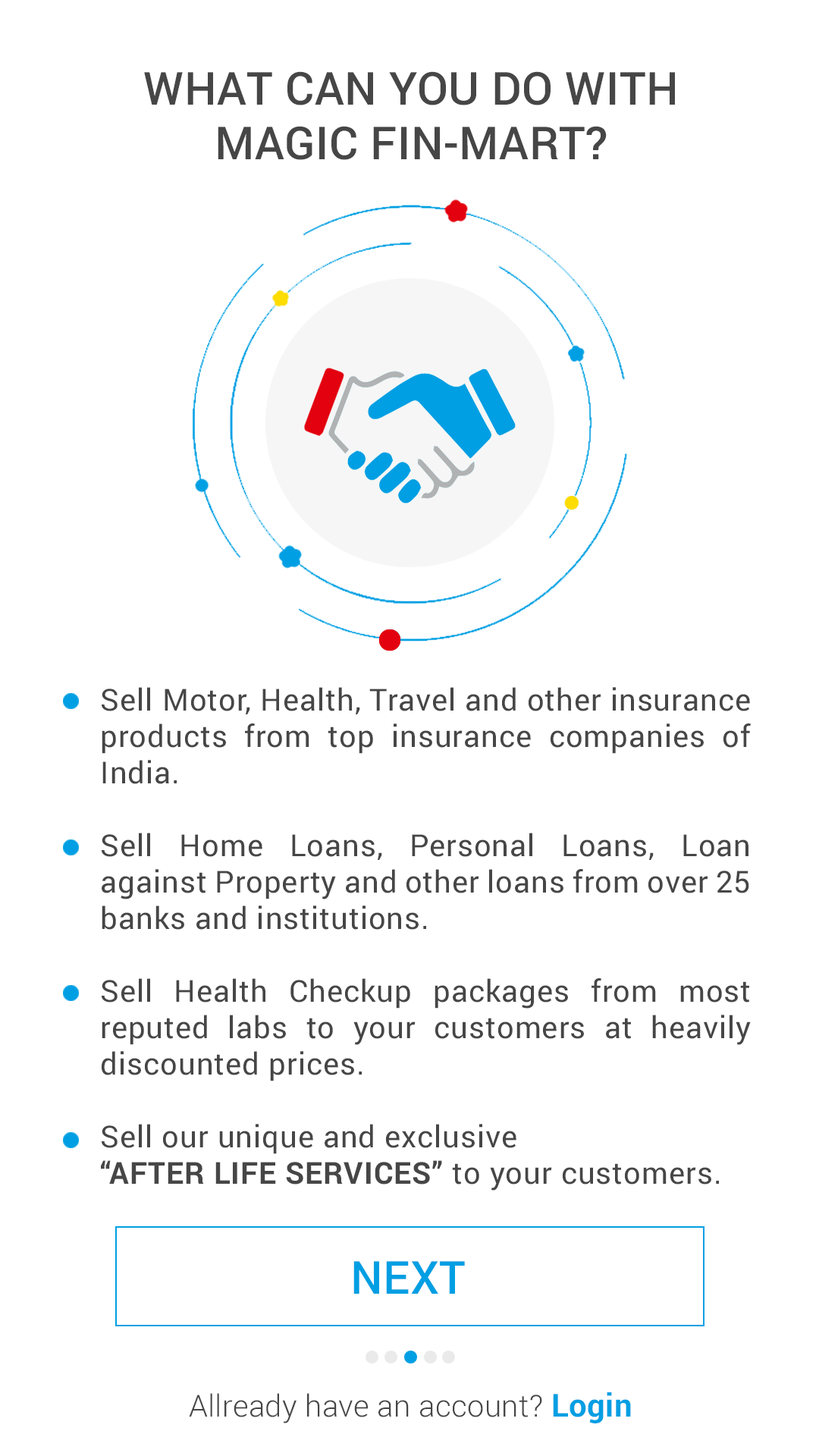
<style>
.page{position:relative;width:819px;height:1456px;background:#ffffff}
.page>*{position:absolute;margin:0}
.t1{font:45.5px "Roboto-Medium";letter-spacing:0.01em;color:#464646;text-transform:uppercase}
.t2{font:30.3px "Roboto-Regular";letter-spacing:0.025em;color:#464646}
.t3{font:30.3px "Roboto-Bold";letter-spacing:0.025em;color:#464646;text-transform:uppercase}
.t4{font:45.5px "Roboto-Medium";letter-spacing:0.01em;color:#009fe3;text-transform:uppercase}
.t5{font:30.3px "Roboto-Light";letter-spacing:0.01em;color:#464646}
.t6{font:31.8px "Roboto-Bold";letter-spacing:0.01em;color:#009fe3}
</style>
<div class="page">
<p class="t1" style="left:144px;top:71px;width:531px;height:89px;text-align:center">WHAT can you do with<br>magic fin-mart?</p>
<p class="t2" style="left:101px;top:687px;width:650px;height:504px;text-align:justify">Sell Motor, Health, Travel and other insurance products from top insurance companies of India.<br><br>Sell Home Loans, Personal Loans, Loan against Property and other loans from over 25 banks and institutions.<br><br>Sell Health Checkup packages from most reputed labs to your customers at heavily discounted prices.<br><br>Sell our unique and exclusive <br><span class="t3">“After Life Services”</span> to your customers.</p>
<p class="t4" style="left:353px;top:1261px;width:112px;height:33px">NEXT</p>
<p class="t5" style="left:189px;top:1392px;width:442px;height:31px">Allready have an account? <span class="t6">Login</span></p>
</div>
